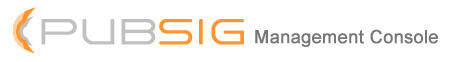
<style>
.page{position:relative;width:449px;height:62px;background:#ffffff}
.page>*{position:absolute;margin:0}
.t1{font:36px "ArkitechRound-Light";color:#c0c0c0;font-weight:bold}
.t2{font:36px "ArkitechRound-Light";color:#ff962f;font-weight:bold}
.t3{font:36px "ArkitechRound-Light";letter-spacing:0.04em;color:#ff962f;font-weight:bold}
.t4{font:36px "ArkitechRound-Light";letter-spacing:0.001em;color:#ff962f;font-weight:bold}
.t5{font:18px "ArialMT";color:#777777;font-weight:bold}
</style>
<div class="page">
<p class="t1" style="left:41px;top:19px;width:203px;height:26px">Pub<span class="t2">S</span><span class="t3">i</span><span class="t4">g</span></p>
<p class="t5" style="left:255px;top:29px;width:183px;height:18px">Management Console</p>
</div>
